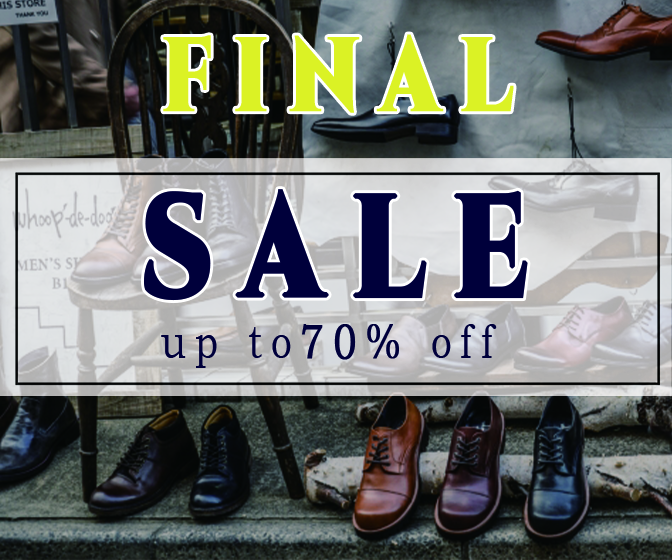
<style>
.page{position:relative;width:672px;height:560px}
.page>*{position:absolute;margin:0}
.t1{font:104px "Cinzel-Black";letter-spacing:0.24em;color:#dbf225;font-weight:bold;scale:0.77 1}
.t2{font:143.9px "Cinzel-Black";letter-spacing:0.24em;color:#00003b;font-weight:bold;scale:0.77 1}
</style>
<div class="page">
<p class="t1" style="left:163px;top:34px;width:351px;height:79px">FINAL</p>
<p class="t2" style="left:143px;top:189px;width:385px;height:112px">SALE</p>
</div>
